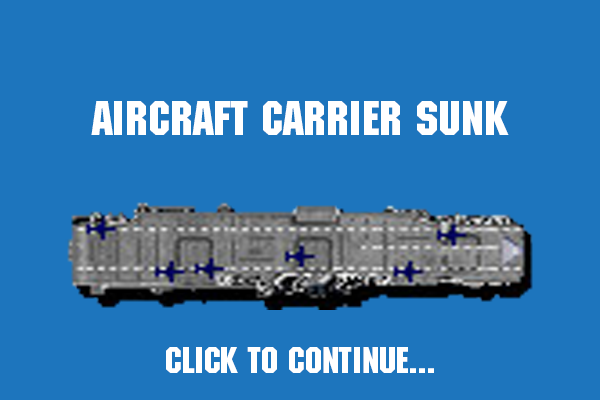
<style>
.page{position:relative;width:600px;height:400px;background:#1d75bd}
.page>*{position:absolute;margin:0}
.t1{font:48px "MachineStd";color:#ffffff}
.t2{font:36px "MachineStd";color:#ffffff}
</style>
<div class="page">
<p class="t1" style="left:91px;top:101px;width:418px;height:34px">Aircraft Carrier SUNK</p>
<p class="t2" style="left:166px;top:347px;width:268px;height:26px">Click to continue...</p>
</div>
